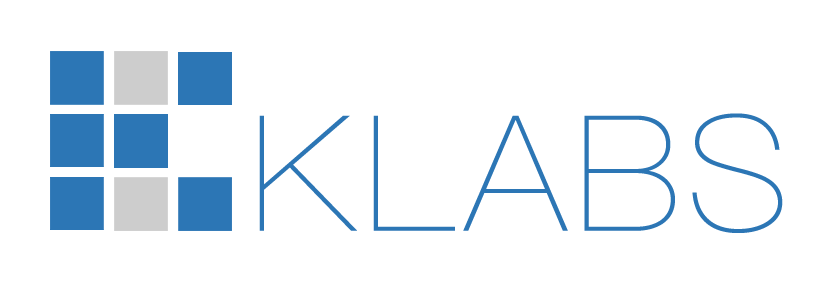
<style>
.page{position:relative;width:828px;height:284px;background:#ffffff}
.page>*{position:absolute;margin:0}
.t1{font:161px "PingFangSC-Ultralight";letter-spacing:0.025em;color:#2c76b5;text-transform:uppercase;scale:1.05 1}
</style>
<div class="page">
<p class="t1" style="left:259px;top:113px;width:524px;height:120px">KLABS</p>
</div>
